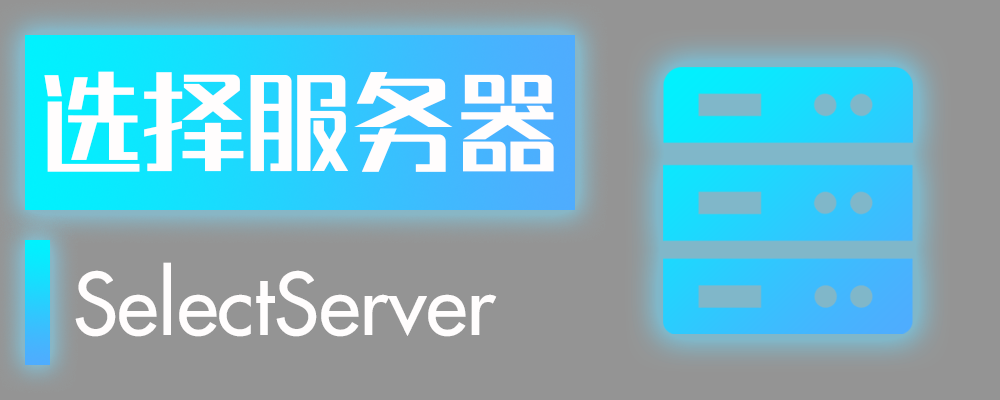
<style>
.page{position:relative;width:1000px;height:400px;background:#949494}
.page>*{position:absolute;margin:0}
.t1{font:104.2px "REEJIZhenyanGB20GX-Medium";color:#fffdfd}
.t2{font:83.3px "Futura-Medium";color:#fffdfd}
</style>
<div class="page">
<p class="t1" style="left:44px;top:71px;width:510px;height:101px">选择服务器</p>
<p class="t2" style="left:75px;top:262px;width:422px;height:75px">SelectServer</p>
</div>
